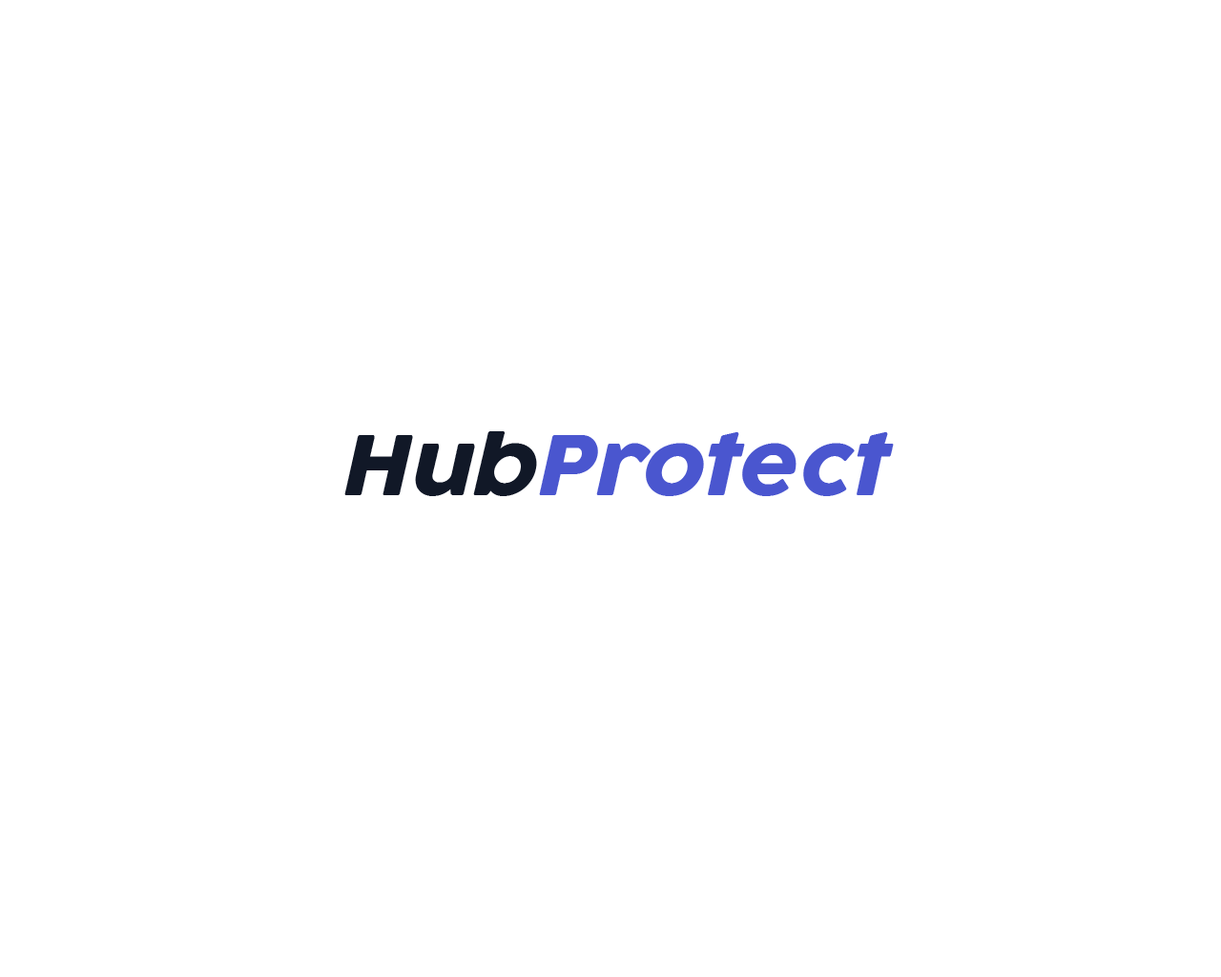
<style>
.page{position:relative;width:1221px;height:977px;background:#ffffff}
.page>*{position:absolute;margin:0}
.t1{font:81.6px "CocogoosePro-Italic";color:#4a56cf;scale:1.05 1}
.t2{font:81.6px "CocogoosePro-Italic";color:#111827;scale:1.05 1}
</style>
<div class="page">
<p class="t1" style="left:344px;top:431px;width:550px;height:65px"><span class="t2">Hub</span>Protect</p>
</div>
